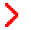
<style>
.page{position:relative;width:31px;height:30px;background:#ffffff}
.page>*{position:absolute;margin:0}
.t1{font:33.3px "VCROSDMono";color:#fe0000}
</style>
<div class="page">
<p class="t1" style="left:5px;top:3px;width:14px;height:24px">&gt;</p>
</div>
